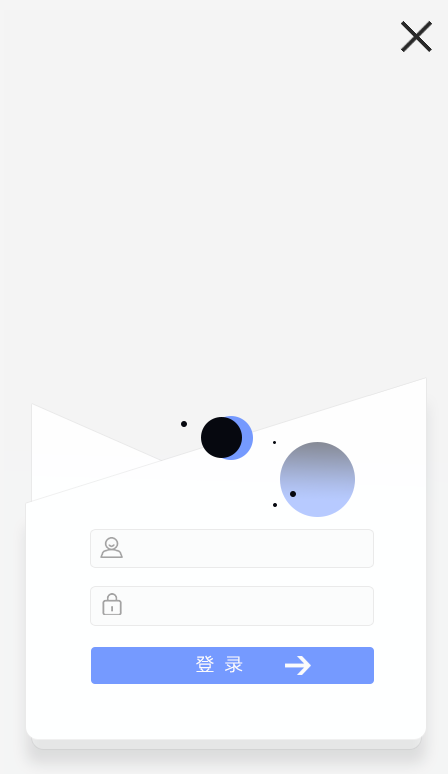
<style>
.page{position:relative;width:448px;height:774px;background:#f4f4f4}
.page>*{position:absolute;margin:0}
.t1{font:18px "MicrosoftYaHeiLight";color:#fcfbfb}
</style>
<div class="page">
<p class="t1" style="left:196px;top:655px;width:47px;height:18px">登  录</p>
</div>
